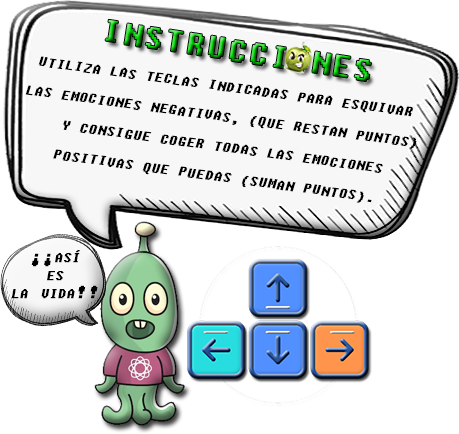
<style>
.page{position:relative;width:459px;height:434px;background:#ffffff}
.page>*{position:absolute;margin:0}
.t1{font:30px "Fixedsys";letter-spacing:0.08em;text-transform:uppercase}
.t2{font:22px/30px "Fixedsys";letter-spacing:0.075em;color:#000000;text-transform:uppercase;font-weight:bold;font-style:italic}
.t3{font:30px/18px "Fixedsys";letter-spacing:0.075em;color:#000000;font-variant:small-caps;font-weight:bold;font-style:italic}
</style>
<div class="page">
<p class="t1" style="left:105px;top:19px;width:266px;height:62px;rotate:9deg">Instrucciones</p>
<p class="t2" style="left:25px;top:56px;width:392px;height:147px;text-align:center;rotate:8deg">utiliza las teclas indicadas para esquivar <br>las emociones negativas, (que restan puntos)<br> y consigue coger todas las emociones <br>positivas que puedas (suman puntos).</p>
<p class="t3" style="left:11px;top:250px;width:87px;height:49px;text-align:center">¡¡así<br>es<br>la vida!!</p>
</div>
